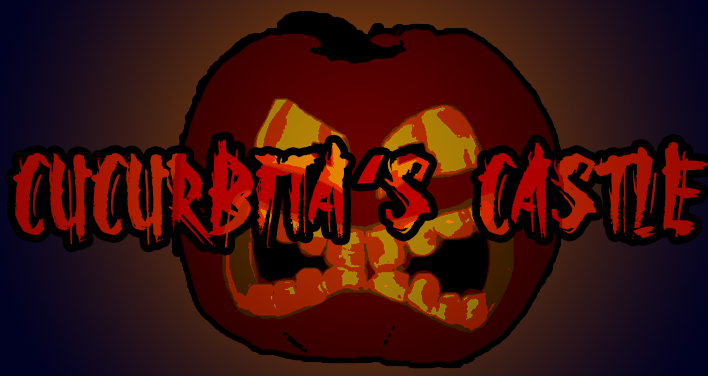
<style>
.page{position:relative;width:708px;height:376px}
.page>*{position:absolute;margin:0}
.t1{font:117.3px "TheOthersAreHere";color:#af0c00;scale:1.53 1}
.t2{font:117.3px "MyriadPro-Regular";color:#af0c00;scale:1.53 1}
</style>
<div class="page">
<p class="t1" style="left:13px;top:139px;width:696px;height:110px">Cucurbita<span class="t2">‘</span>s Castle</p>
</div>
